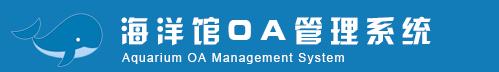
<style>
.page{position:relative;width:499px;height:72px;background:#127cb9}
.page>*{position:absolute;margin:0}
.t1{font:30px "HYk2gj";letter-spacing:0.2em;color:#ffffff}
.t2{font:12px "ArialMT";letter-spacing:0.1em;color:#ffffff}
</style>
<div class="page">
<p class="t1" style="left:121px;top:16px;width:310px;height:30px">海洋馆OA管理系统</p>
<p class="t2" style="left:122px;top:53px;width:222px;height:11px">Aquarium OA Management System</p>
</div>
